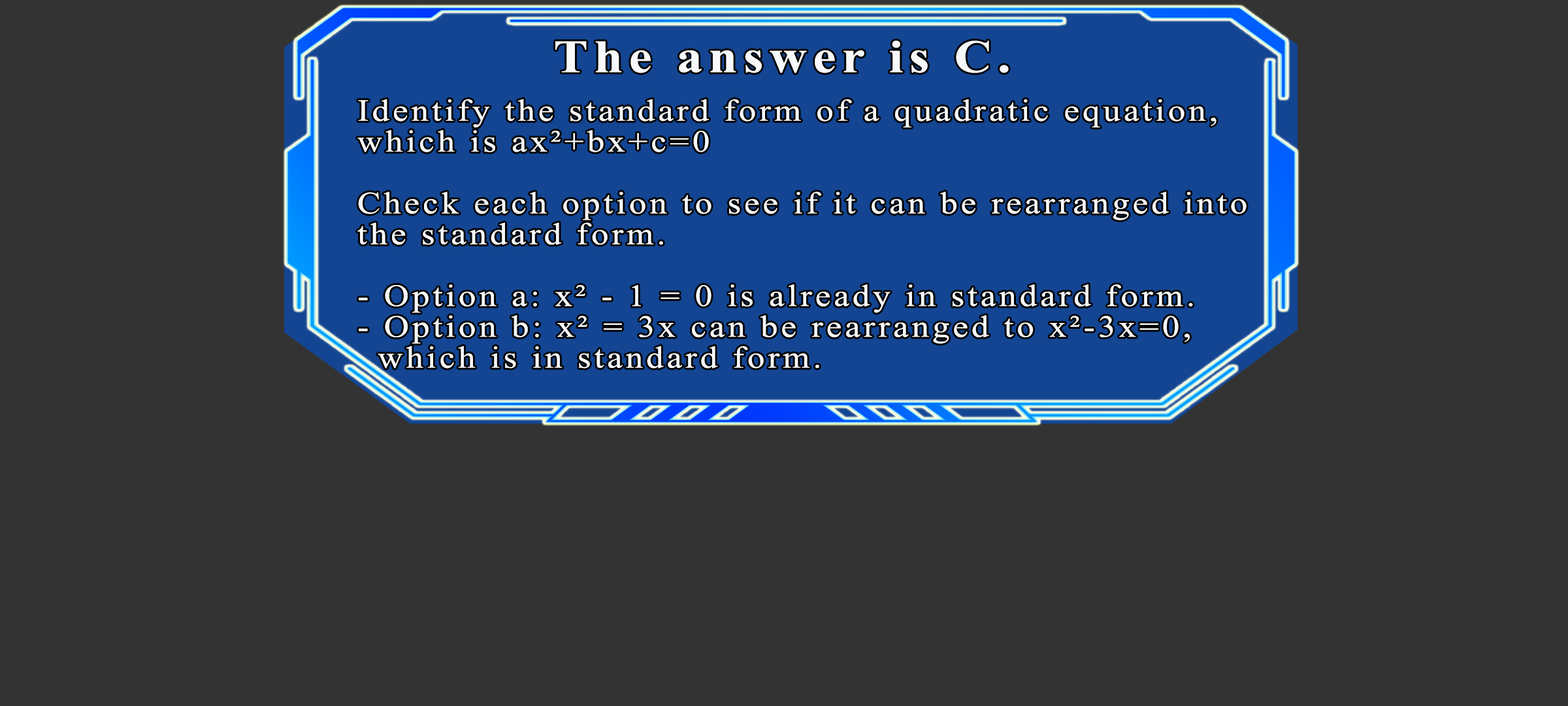
<style>
.page{position:relative;width:1568px;height:706px;background:#333333}
.page>*{position:absolute;margin:0}
.t1{font:46.3px "TimesNewRomanPS-BoldMT";letter-spacing:0.115em;color:#f7f9fb;scale:1.12 1}
.t2{font:30.9px/30.9px "TimesNewRomanPSMT";letter-spacing:0.095em;color:#f7f9fb;scale:1.12 1}
</style>
<div class="page">
<p class="t1" style="left:555px;top:41px;width:454px;height:32px">The answer is C.</p>
<p class="t2" style="left:357px;top:99px;width:890px;height:269px">Identify the standard form of a quadratic equation,<br>which is ax²+bx+c=0<br><br>Check each option to see if it can be rearranged into<br>the standard form.<br><br>- Option a: x² - 1 = 0 is already in standard form.<br>- Option b: x² = 3x can be rearranged to x²-3x=0,<br> which is in standard form.</p>
</div>
